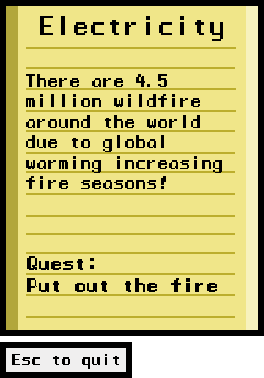
<style>
.page{position:relative;width:264px;height:378px;background:#f0e689}
.page>*{position:absolute;margin:0}
.t1{font:25px "ManaspaceReg";color:#000000}
.t2{font:17px "ManaspaceReg";color:#000000}
.t3{font:18px "ManaspaceReg";color:#000000}
</style>
<div class="page">
<p class="t1" style="left:40px;top:16px;width:183px;height:25px">Electricity</p>
<p class="t2" style="left:26px;top:74px;width:196px;height:115px">There are 4.5 million wildfire around the world due to global warming increasing fire seasons!</p>
<p class="t3" style="left:27px;top:256px;width:190px;height:36px">Quest:<br>Put out the fire</p>
</div>
